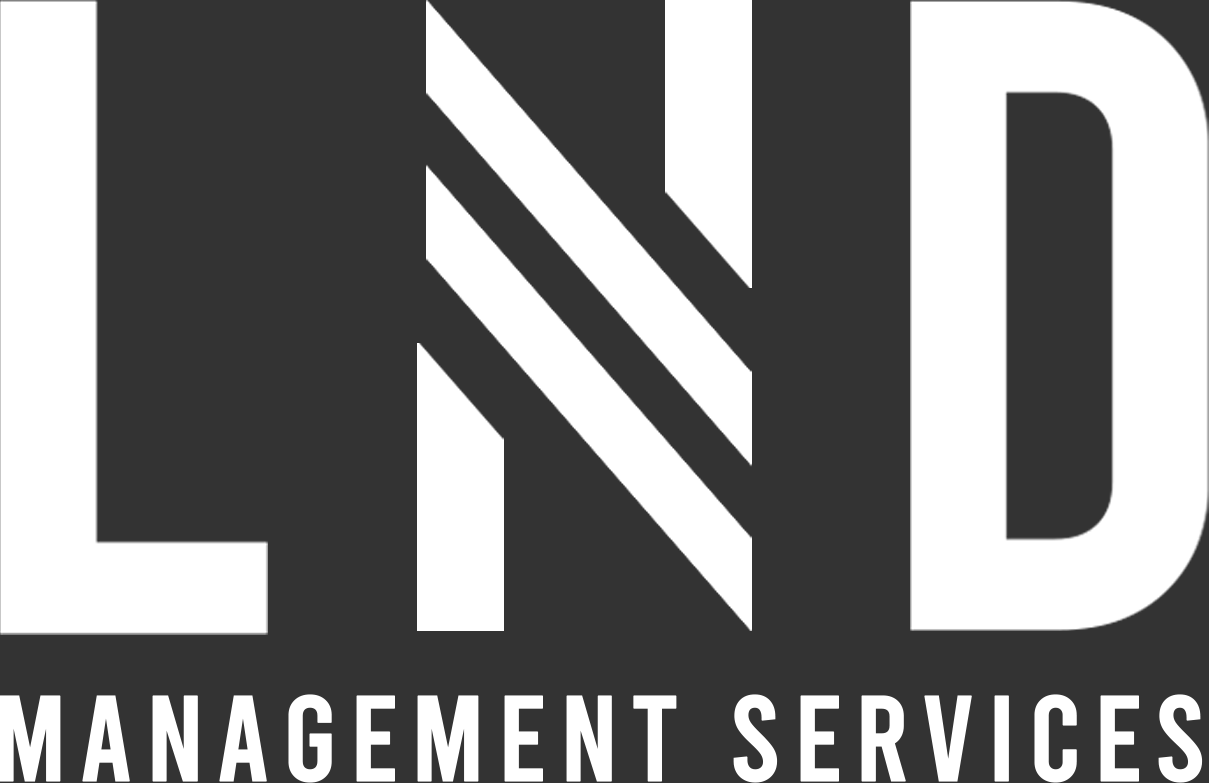
<style>
.page{position:relative;width:1209px;height:783px;background:#333333}
.page>*{position:absolute;margin:0}
.t1{font:121px "Bebas-Regular";letter-spacing:0.08em;color:#ffffff;font-weight:bold}
</style>
<div class="page">
<p class="t1" style="left:0px;top:694px;width:1203px;height:89px">MANAGEMENT SERVICES</p>
</div>
